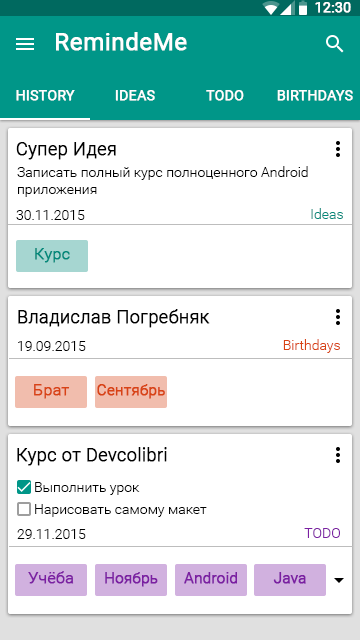
<style>
.page{position:relative;width:360px;height:640px;background:#ffffff}
.page>*{position:absolute;margin:0}
.t1{font:14px "Roboto-Regular";color:#ffffff;font-weight:bold}
.t2{font:24px "Roboto-Regular";color:#ffffff;font-weight:bold}
.t3{font:18px "Roboto-Light";color:#000000;font-weight:bold}
.t4{font:14px "Roboto-Light";color:#000000}
.t5{font:14px "Roboto-Light";color:#00897b}
.t6{font:16px "Roboto-Light";color:#00897b;font-weight:bold}
.t7{font:14px "Roboto-Light";color:#d84315}
.t8{font:16px "Roboto-Light";color:#d84315;font-weight:bold}
.t9{font:15px "Roboto-Light";color:#d84315;font-weight:bold}
.t10{font:14px "Roboto-Light";color:#7b1fa2}
.t11{font:16px "Roboto-Light";color:#7b1fa2;font-weight:bold}
.t12{font:15px "Roboto-Light";color:#7b1fa2;font-weight:bold}
</style>
<div class="page">
<p class="t1" style="left:315px;top:2px;width:36px;height:11px">12:30</p>
<p class="t2" style="left:56px;top:32px;width:131px;height:19px">RemindeMe</p>
<p class="t1" style="left:16px;top:90px;width:59px;height:11px">HISTORY</p>
<p class="t1" style="left:115px;top:90px;width:40px;height:11px">IDEAS</p>
<p class="t1" style="left:206px;top:90px;width:38px;height:11px">TODO</p>
<p class="t1" style="left:277px;top:90px;width:76px;height:11px">BIRTHDAYS</p>
<p class="t3" style="left:16px;top:142px;width:100px;height:18px">Супер Идея</p>
<p class="t4" style="left:17px;top:166px;width:291px;height:31px">Записать полный курс полноценного Android приложения</p>
<p class="t5" style="left:311px;top:208px;width:32px;height:11px">Ideas</p>
<p class="t4" style="left:16px;top:210px;width:69px;height:10px">30.11.2015</p>
<p class="t6" style="left:35px;top:248px;width:35px;height:15px">Курс</p>
<p class="t3" style="left:18px;top:309px;width:192px;height:19px">Владислав Погребняк</p>
<p class="t4" style="left:18px;top:341px;width:68px;height:10px">19.09.2015</p>
<p class="t7" style="left:283px;top:339px;width:57px;height:14px">Birthdays</p>
<p class="t8" style="left:34px;top:384px;width:36px;height:15px">Брат</p>
<p class="t9" style="left:97px;top:384px;width:68px;height:15px">Сентябрь</p>
<p class="t3" style="left:17px;top:447px;width:150px;height:19px">Курс от Devcolibri</p>
<p class="t4" style="left:35px;top:482px;width:105px;height:13px">Выполнить урок</p>
<p class="t4" style="left:35px;top:504px;width:172px;height:13px">Нарисовать самому макет</p>
<p class="t4" style="left:17px;top:529px;width:69px;height:10px">29.11.2015</p>
<p class="t10" style="left:304px;top:528px;width:36px;height:10px">TODO</p>
<p class="t11" style="left:28px;top:571px;width:46px;height:13px">Учёба</p>
<p class="t12" style="left:105px;top:572px;width:53px;height:15px">Ноябрь</p>
<p class="t12" style="left:184px;top:572px;width:53px;height:12px">Android</p>
<p class="t12" style="left:273px;top:572px;width:33px;height:12px">Java</p>
</div>
